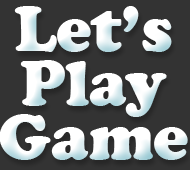
<style>
.page{position:relative;width:190px;height:170px;background:#333333}
.page>*{position:absolute;margin:0}
.t1{font:66.2px/54px "CooperBlack";color:#ffffff}
</style>
<div class="page">
<p class="t1" style="left:0px;top:6px;width:188px;height:154px;text-align:center">Let’s<br>Play<br>Game</p>
</div>
